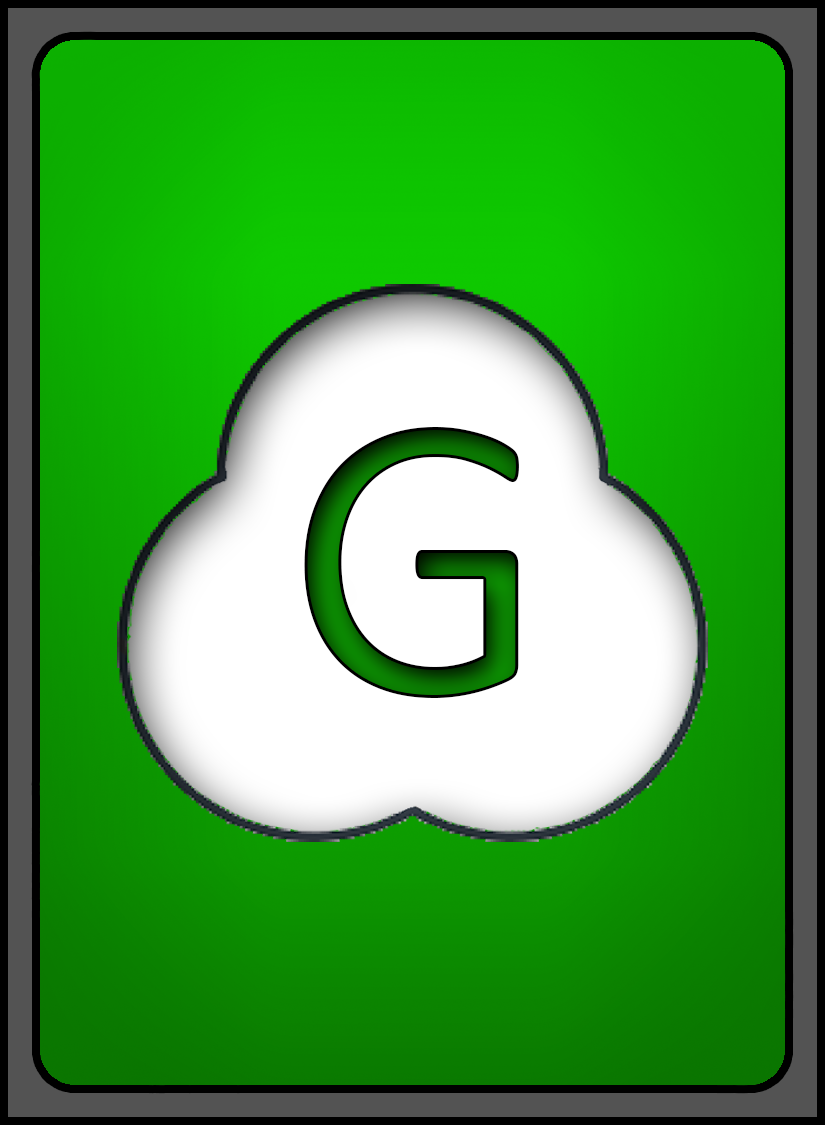
<style>
.page{position:relative;width:825px;height:1125px}
.page>*{position:absolute;margin:0}
.t1{font:416.7px "Calibri"}
</style>
<div class="page">
<p class="t1" style="left:304px;top:427px;width:215px;height:271px">G</p>
</div>
